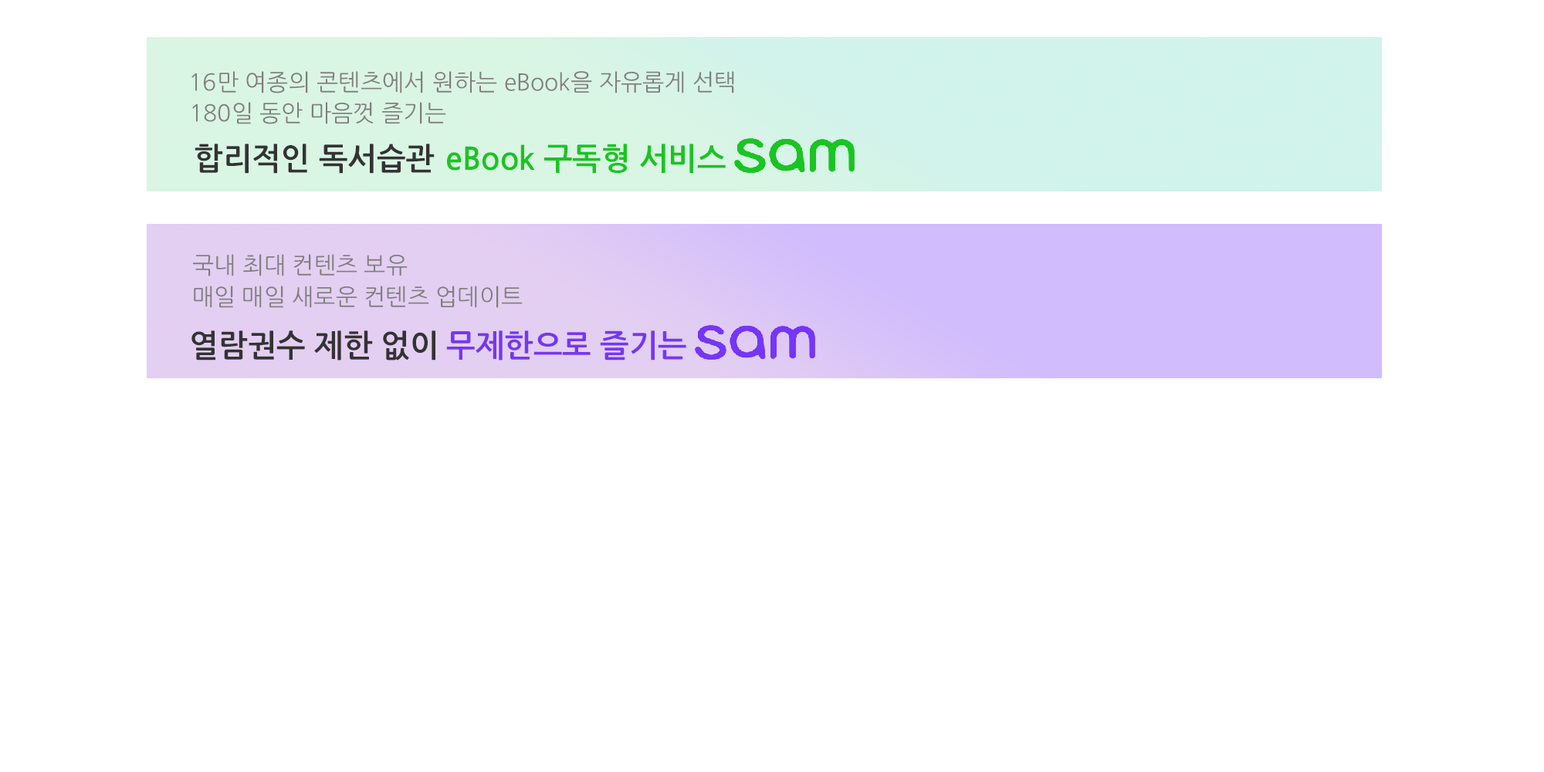
<style>
.page{position:relative;width:1544px;height:772px;background:#ffffff}
.page>*{position:absolute;margin:0}
.t1{font:23.2px "NanumGothicOTF";color:#807e7e}
.t2{font:30.9px "NanumGothicOTFBold";color:#333333}
.t3{font:30.9px "NanumGothicOTFBold";color:#1ac422}
.t4{font:30.9px "NanumGothicOTFBold";color:#7536f7}
</style>
<div class="page">
<p class="t1" style="left:191px;top:71px;width:543px;height:22px">16만 여종의 콘텐츠에서 원하는 eBook을 자유롭게 선택</p>
<p class="t1" style="left:192px;top:102px;width:254px;height:22px">180일 동안 마음껏 즐기는</p>
<p class="t2" style="left:195px;top:144px;width:240px;height:30px">합리적인 독서습관</p>
<p class="t3" style="left:447px;top:144px;width:279px;height:30px">eBook 구독형 서비스</p>
<p class="t1" style="left:193px;top:254px;width:215px;height:22px">국내 최대 컨텐츠 보유</p>
<p class="t1" style="left:194px;top:286px;width:329px;height:22px">매일 매일 새로운 컨텐츠 업데이트</p>
<p class="t2" style="left:191px;top:330px;width:244px;height:31px">열람권수 제한 없이</p>
<p class="t4" style="left:446px;top:330px;width:240px;height:31px">무제한으로 즐기는</p>
</div>
